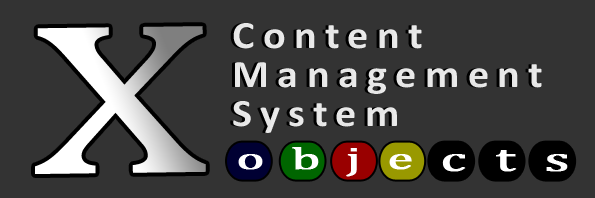
<style>
.page{position:relative;width:595px;height:198px;background:#333333}
.page>*{position:absolute;margin:0}
.t1{font:311.8px "CambriaMath";letter-spacing:0.1em;scale:1.19 1}
.t2{font:39px/39px "Calibri-Bold";letter-spacing:0.2em;scale:1.08 1}
.t3{font:39px/39px "Calibri-Bold";letter-spacing:0.2em;color:#e7e7e7;scale:1.08 1}
.t4{font:32.3px "CambriaMath";letter-spacing:0.5em;color:#ffffff;font-weight:bold;scale:1.6 1}
.t5{font:35px "CambriaMath";letter-spacing:0.5em;color:#ffffff;font-weight:bold;scale:1.62 1}
</style>
<div class="page">
<p class="t1" style="left:35px;top:26px;width:171px;height:148px;rotate:-1deg">x</p>
<p class="t2" style="left:230px;top:23px;width:309px;height:110px">Content <br>Management<br>System</p>
<p class="t3" style="left:233px;top:23px;width:309px;height:110px">Content <br>Management<br>System</p>
<p class="t4" style="left:238px;top:147px;width:174px;height:30px">obje</p>
<p class="t5" style="left:442px;top:150px;width:126px;height:22px">cts</p>
</div>
